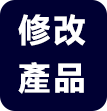
<style>
.page{position:relative;width:107px;height:111px;background:#000033}
.page>*{position:absolute;margin:0}
.t1{font:32px/48px "MicrosoftYaHeiUI-Bold";letter-spacing:0.1em;color:#ffffff}
</style>
<div class="page">
<p class="t1" style="left:18px;top:14px;width:68px;height:80px;text-align:center">修改<br>產品</p>
</div>
